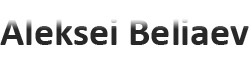
<style>
.page{position:relative;width:250px;height:70px;background:#ffffff}
.page>*{position:absolute;margin:0}
.t1{font:40px "Calibri-Bold";color:#282828}
</style>
<div class="page">
<p class="t1" style="left:0px;top:18px;width:249px;height:27px">Aleksei Beliaev</p>
</div>
